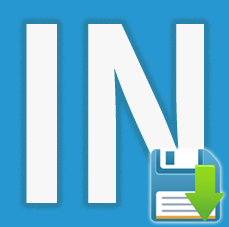
<style>
.page{position:relative;width:229px;height:227px;background:#2697d0}
.page>*{position:absolute;margin:0}
.t1{font:233.2px "AdobeGothicStd-Bold";color:#f7f7f7;scale:0.88 1}
</style>
<div class="page">
<p class="t1" style="left:26px;top:24px;width:178px;height:179px">IN</p>
</div>
